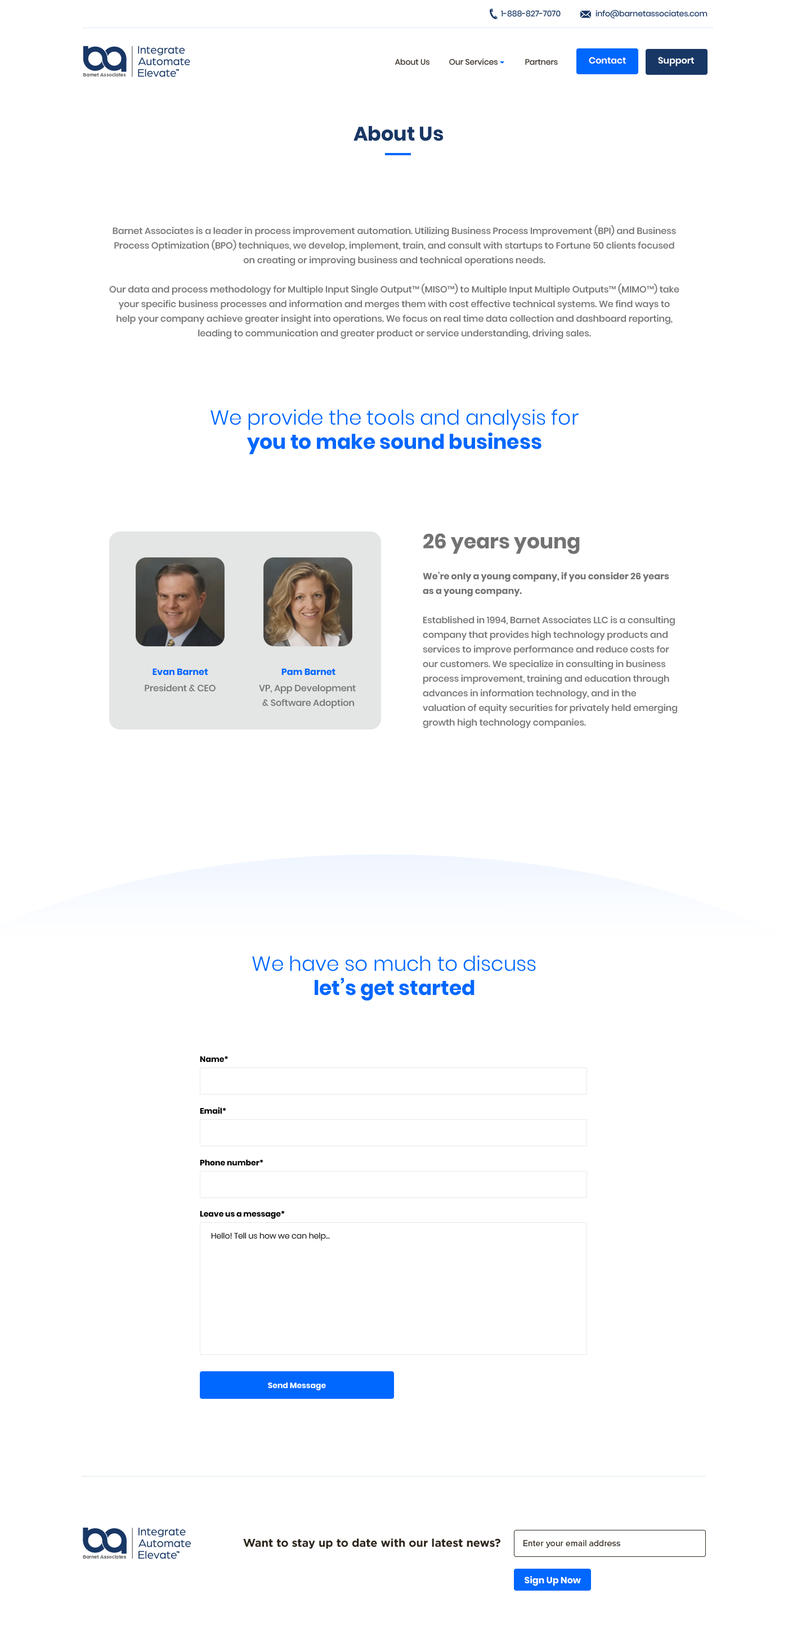
<style>
.page{position:relative;width:788px;height:1630px;background:#ffffff}
.page>*{position:absolute;margin:0}
.t1{font:7.9px "Poppins-Regular";color:#183765}
.t2{font:7.9px "Poppins-Regular";color:#2f281e}
.t3{font:9px "Poppins-SemiBold";color:#ffffff}
.t4{font:19.7px "Poppins-Bold";color:#183765}
.t5{font:9px/14.6px "Poppins-Medium";color:#737373}
.t6{font:20.2px "Poppins-Light";color:#0067ff}
.t7{font:20.2px "Poppins-Bold";color:#0067ff}
.t8{font:20.2px "Poppins-Bold";color:#737373}
.t9{font:9px/14.6px "Poppins-Bold";color:#737373}
.t10{font:9px "Poppins-Bold";color:#0067ff}
.t11{font:9px "Poppins-Medium";color:#737373}
.t12{font:7.9px "Poppins-Bold";color:#000000}
.t13{font:7.9px "Poppins-Light";color:#000000}
.t14{font:7.9px "Poppins-Bold";color:#ffffff}
.t15{font:11.2px "Gotham-Bold";color:#2f281e}
.t16{font:9px "ProximaNova-Regular";color:#2f281e}
.t17{font:9px "Poppins-Bold";color:#ffffff}
</style>
<div class="page">
<p class="t1" style="left:501px;top:10px;width:59px;height:7px">1-888-827-7070</p>
<p class="t1" style="left:595px;top:10px;width:112px;height:9px">info@barnetassociates.com</p>
<p class="t2" style="left:395px;top:58px;width:162px;height:7px">About Us          Our Services              Partners</p>
<p class="t3" style="left:588px;top:57px;width:38px;height:7px">Contact</p>
<p class="t3" style="left:658px;top:57px;width:36px;height:9px">Support</p>
<p class="t4" style="left:353px;top:126px;width:90px;height:15px">About Us</p>
<p class="t5" style="left:109px;top:225px;width:570px;height:114px;text-align:center">Barnet Associates is a leader in process improvement automation. Utilizing Business Process Improvement (BPI) and Business Process Optimization (BPO) techniques, we develop, implement, train, and consult with startups to Fortune 50 clients focused on creating or improving business and technical operations needs.<br><br>Our data and process methodology for Multiple Input Single Output™ (MISO™) to Multiple Input Multiple Outputs™ (MIMO™) take your specific business processes and information and merges them with cost effective technical systems. We find ways to help your company achieve greater insight into operations. We focus on real time data collection and dashboard reporting, leading to communication and greater product or service understanding, driving sales.</p>
<p class="t6" style="left:210px;top:409px;width:368px;height:45px;text-align:center">We provide the tools and analysis for <span class="t7">you to make sound business </span>decisions.</p>
<p class="t8" style="left:423px;top:533px;width:156px;height:21px">26 years young</p>
<p class="t5" style="left:422px;top:572px;width:255px;height:156px"><span class="t9">We’re only a young company, if you consider 26 years as a young company.<br></span><br>Established in 1994, Barnet Associates LLC is a consulting company that provides high technology products and services to improve performance and reduce costs for our customers. We specialize in consulting in business process improvement, training and education through advances in information technology, and in the valuation of equity securities for privately held emerging growth high technology companies.</p>
<p class="t10" style="left:152px;top:668px;width:56px;height:7px">Evan Barnet</p>
<p class="t10" style="left:281px;top:668px;width:54px;height:7px">Pam Barnet</p>
<p class="t11" style="left:145px;top:684px;width:70px;height:8px">President &amp; CEO</p>
<p class="t5" style="left:259px;top:685px;width:97px;height:24px;text-align:center">VP, App Development <br>&amp; Software Adoption</p>
<p class="t6" style="left:252px;top:955px;width:284px;height:46px;text-align:center">We have so much to discuss <br><span class="t7">let’s get started</span></p>
<p class="t12" style="left:200px;top:1056px;width:28px;height:6px">Name*</p>
<p class="t12" style="left:200px;top:1107px;width:26px;height:7px">Email*</p>
<p class="t12" style="left:200px;top:1159px;width:63px;height:7px">Phone number*</p>
<p class="t12" style="left:200px;top:1210px;width:85px;height:9px">Leave us a message*</p>
<p class="t13" style="left:211px;top:1232px;width:119px;height:9px">Hello! Tell us how we can help…</p>
<p class="t14" style="left:268px;top:1382px;width:58px;height:8px">Send Message</p>
<p class="t15" style="left:243px;top:1538px;width:257px;height:11px">Want to stay up to date with our latest news?</p>
<p class="t16" style="left:523px;top:1540px;width:97px;height:8px">Enter your email address</p>
<p class="t17" style="left:524px;top:1576px;width:56px;height:10px">Sign Up Now</p>
</div>
